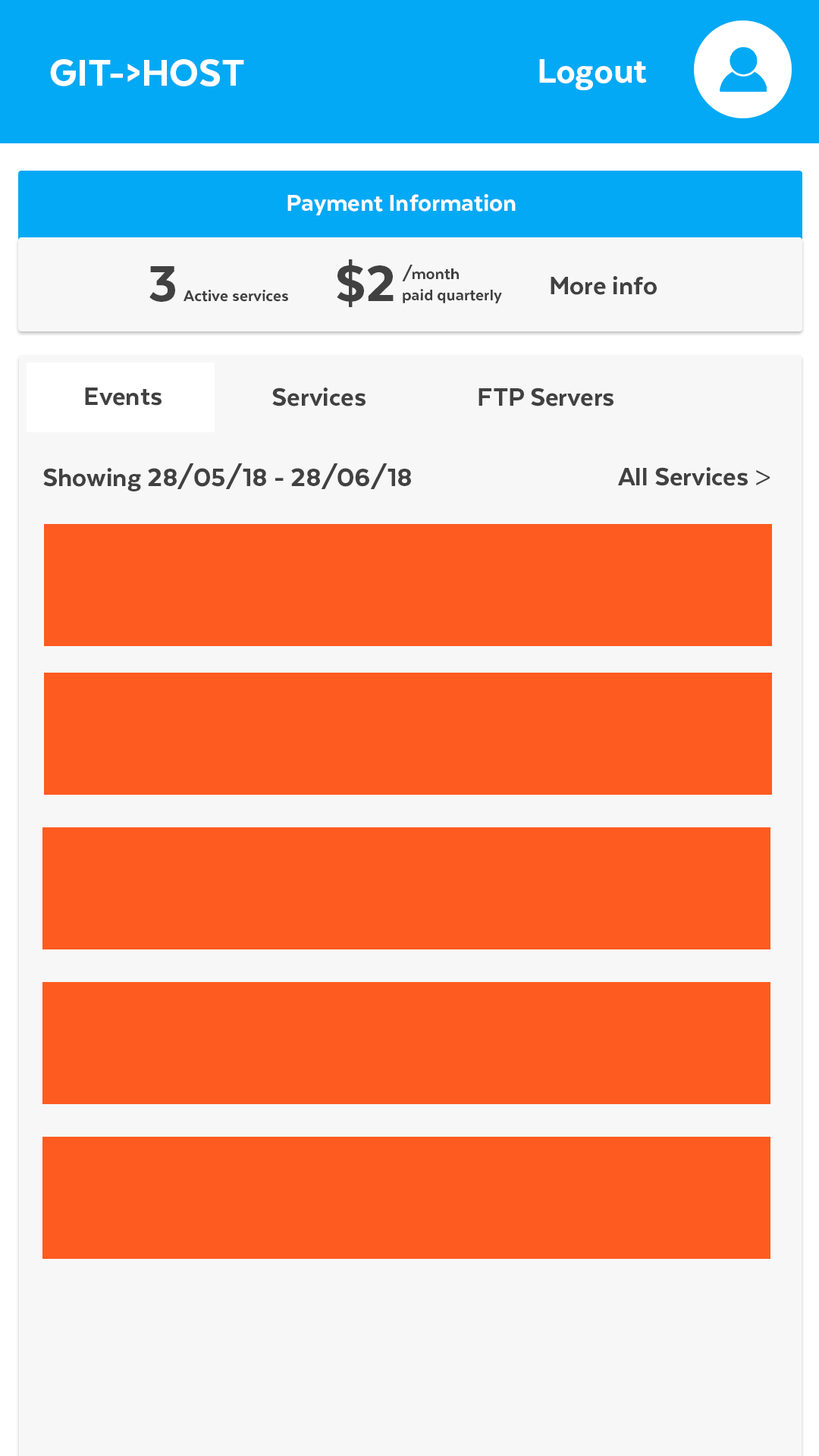
<style>
.page{position:relative;width:819px;height:1456px;background:#fe5b20}
.page>*{position:absolute;margin:0}
.t1{font:43.4px "Texta-Heavy";color:#ffffff}
.t2{font:39.4px "Texta-Heavy";color:#ffffff}
.t3{font:27px "Texta-Heavy";color:#ffffff}
.t4{font:57.8px "Texta-Heavy";color:#414141}
.t5{font:18px "Texta-Heavy";color:#414141}
.t6{font:28.9px "Texta-Heavy";color:#414141}
.t7{font:28.9px "MyriadPro-Regular";color:#414141}
</style>
<div class="page">
<p class="t1" style="left:50px;top:59px;width:194px;height:27px">GIT-&gt;HOST</p>
<p class="t2" style="left:539px;top:59px;width:108px;height:31px">Logout</p>
<p class="t3" style="left:287px;top:194px;width:229px;height:21px">Payment Information</p>
<p class="t4" style="left:149px;top:266px;width:26px;height:36px">3</p>
<p class="t4" style="left:337px;top:259px;width:57px;height:48px">$2</p>
<p class="t5" style="left:402px;top:265px;width:100px;height:38px">/month<br>paid quarterly</p>
<p class="t6" style="left:551px;top:276px;width:106px;height:19px">More info</p>
<p class="t5" style="left:184px;top:290px;width:104px;height:12px">Active services</p>
<p class="t6" style="left:85px;top:388px;width:77px;height:18px">Events</p>
<p class="t6" style="left:272px;top:388px;width:94px;height:18px">Services</p>
<p class="t6" style="left:479px;top:388px;width:134px;height:18px">FTP Servers</p>
<p class="t6" style="left:43px;top:463px;width:368px;height:28px">Showing 28/05/18 - 28/06/18</p>
<p class="t6" style="left:618px;top:467px;width:152px;height:19px">All Services <span class="t7">&gt;</span></p>
</div>
